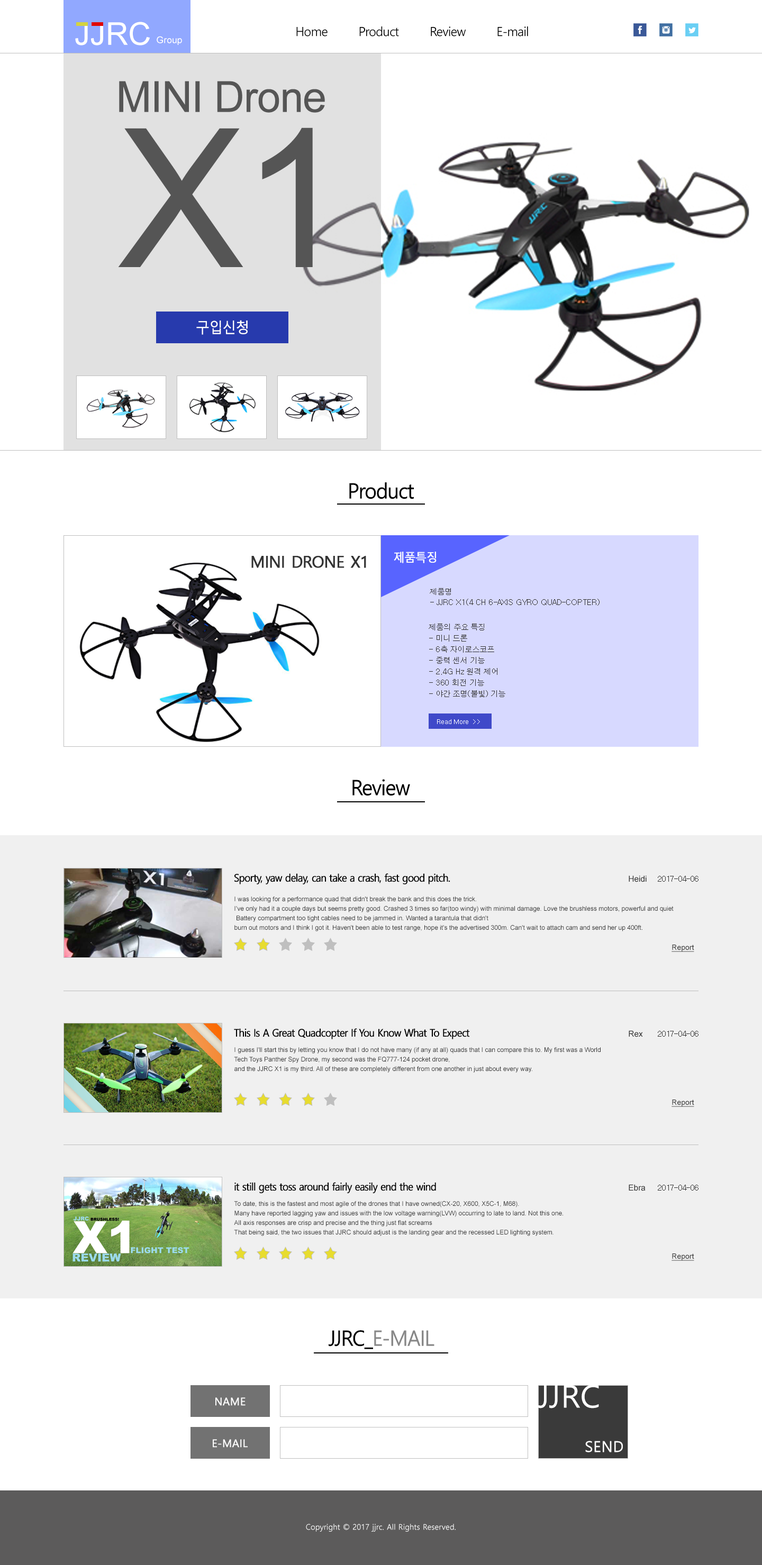
<style>
.page{position:relative;width:762px;height:1565px;background:#ffffff}
.page>*{position:absolute;margin:0}
.t1{font:31.4px "ArialMT";color:#ffffff}
.t2{font:12.7px "MalgunGothic";letter-spacing:-0.04em;color:#000000}
.t3{font:9.3px "ArialMT";color:#ffffff}
.t4{font:42.9px "ArialMT";letter-spacing:-0.04em;color:#555555;font-weight:bold}
.t5{font:193.5px "ArialMT";letter-spacing:-0.04em;color:#555555;font-weight:bold}
.t6{font:14.5px "MalgunGothic";letter-spacing:-0.06em;color:#ffffff;font-weight:bold;scale:0.95 1}
.t7{font:21.1px "MalgunGothic";letter-spacing:-0.06em;color:#000000;font-weight:bold;scale:0.95 1}
.t8{font:16.1px "MalgunGothic";letter-spacing:-0.02em;color:#333333;font-weight:bold}
.t9{font:11.9px "MalgunGothic";letter-spacing:-0.06em;color:#ffffff;font-weight:bold;scale:0.95 1}
.t10{font:7.5px/10.6px "Dotum";letter-spacing:-0.02em;color:#333333}
.t11{font:7.5px/11.1px "Dotum";letter-spacing:-0.02em;color:#333333}
.t12{font:6.9px "Dotum";letter-spacing:-0.04em;color:#ffffff}
.t13{font:10.4px "MalgunGothic";letter-spacing:-0.06em;color:#000000;font-weight:bold;scale:0.95 1}
.t14{font:8.2px "ArialMT";color:#333333}
.t15{font:7.9px "Dotum";color:#333333}
.t16{font:6.3px/9.5px "ArialMT";color:#333333}
.t17{font:7.4px "ArialMT";color:#333333;text-decoration:underline}
.t18{font:21.1px "MalgunGothic";letter-spacing:-0.06em;color:#888888;font-weight:bold;scale:0.95 1}
.t19{font:31px "MalgunGothic";color:#ffffff;font-weight:bold}
.t20{font:10.6px "MalgunGothic";color:#ffffff;font-weight:bold}
.t21{font:14.8px "MalgunGothic";color:#ffffff;font-weight:bold}
.t22{font:7.7px "MalgunGothic";color:#ffffff}
</style>
<div class="page">
<p class="t1" style="left:75px;top:22px;width:75px;height:23px">JJRC</p>
<p class="t2" style="left:296px;top:26px;width:232px;height:11px">Home        Product        Review        E-mail</p>
<p class="t3" style="left:157px;top:36px;width:25px;height:9px">Group</p>
<p class="t4" style="left:119px;top:81px;width:206px;height:32px">MINI Drone</p>
<p class="t5" style="left:118px;top:127px;width:195px;height:140px">X1</p>
<p class="t6" style="left:196px;top:320px;width:52px;height:15px">구입신청</p>
<p class="t7" style="left:349px;top:482px;width:65px;height:17px">Product</p>
<p class="t8" style="left:251px;top:556px;width:115px;height:12px">MINI DRONE X1</p>
<p class="t9" style="left:394px;top:552px;width:42px;height:11px">제품특징</p>
<p class="t10" style="left:430px;top:588px;width:169px;height:18px">제품명<br>- JJRC X1(4 CH 6-AXIS GYRO QUAD-COPTER)</p>
<p class="t11" style="left:428px;top:624px;width:77px;height:73px">제품의 주요 특징<br>- 미니 드론<br>- 6축 자이로스코프<br>- 중력 센서 기능<br>- 2.4G Hz 원격 제어<br>- 360 회전 기능<br>- 야간 조명(불빛) 기능</p>
<p class="t12" style="left:437px;top:719px;width:43px;height:5px">Read More  &gt;&gt;</p>
<p class="t7" style="left:352px;top:779px;width:58px;height:17px">Review</p>
<p class="t13" style="left:234px;top:873px;width:216px;height:12px">Sporty, yaw delay, can take a crash, fast good pitch.</p>
<p class="t14" style="left:628px;top:876px;width:18px;height:6px">Heidi</p>
<p class="t15" style="left:658px;top:876px;width:40px;height:6px">2017-04-06</p>
<p class="t16" style="left:234px;top:897px;width:439px;height:35px">I was looking for a performance quad that didn't break the bank and this does the trick.<br>I've only had it a couple days but seems pretty good. Crashed 3 times so far(too windy) with minimal damage. Love the brushless motors, powerful and quiet<br> Battery compartment too tight cables need to be jammed in. Wanted a tarantula that didn't<br>burn out motors and I think I got it. Haven't been able to test range, hope it's the advertised 300m. Can't wait to attach cam and send her up 400ft.</p>
<p class="t17" style="left:671px;top:945px;width:23px;height:7px">Report</p>
<p class="t13" style="left:234px;top:1028px;width:236px;height:12px">This Is A Great Quadcopter If You Know What To Expect</p>
<p class="t14" style="left:628px;top:1031px;width:15px;height:6px">Rex</p>
<p class="t15" style="left:658px;top:1031px;width:40px;height:6px">2017-04-06</p>
<p class="t16" style="left:234px;top:1047px;width:366px;height:26px">I guess I'll start this by letting you know that I do not have many (if any at all) quads that I can compare this to. My first was a World<br>Tech Toys Panther Spy Drone, my second was the FQ777-124 pocket drone,<br>and the JJRC X1 is my third. All of these are completely different from one another in just about every way.</p>
<p class="t17" style="left:671px;top:1100px;width:23px;height:7px">Report</p>
<p class="t13" style="left:234px;top:1182px;width:202px;height:11px">it still gets toss around fairly easily end the wind</p>
<p class="t14" style="left:628px;top:1184px;width:17px;height:7px">Ebra</p>
<p class="t15" style="left:658px;top:1185px;width:40px;height:6px">2017-04-06</p>
<p class="t16" style="left:234px;top:1201px;width:329px;height:35px">To date, this is the fastest and most agile of the drones that I have owned(CX-20, X600, X5C-1, M68).<br>Many have reported lagging yaw and issues with the low voltage warning(LVW) occurring to late to land. Not this one.<br>All axis responses are crisp and precise and the thing just flat screams<br>That being said, the two issues that JJRC should adjust is the landing gear and the recessed LED lighting system.</p>
<p class="t17" style="left:671px;top:1254px;width:23px;height:7px">Report</p>
<p class="t18" style="left:329px;top:1330px;width:105px;height:20px"><span class="t7">JJRC_</span>E-MAIL</p>
<p class="t19" style="left:538px;top:1385px;width:61px;height:24px">JJRC</p>
<p class="t20" style="left:215px;top:1398px;width:30px;height:8px">NAME</p>
<p class="t20" style="left:213px;top:1439px;width:35px;height:9px">E-MAIL</p>
<p class="t21" style="left:585px;top:1441px;width:38px;height:12px">SEND</p>
<p class="t22" style="left:306px;top:1524px;width:149px;height:8px">Copyright © 2017 jjrc. All Rights Reserved.</p>
</div>
